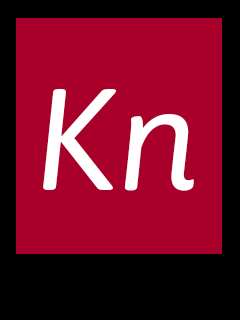
<style>
.page{position:relative;width:240px;height:320px;background:#a8002a}
.page>*{position:absolute;margin:0}
.t1{font:144px "Asap-Italic";color:#ffffff}
</style>
<div class="page">
<p class="t1" style="left:43px;top:89px;width:151px;height:102px">Kn</p>
</div>
